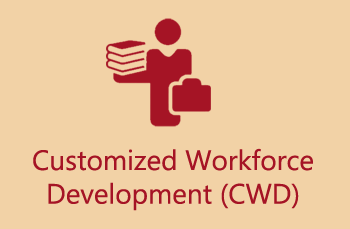
<style>
.page{position:relative;width:350px;height:229px;background:#f2d2a6}
.page>*{position:absolute;margin:0}
.t1{font:28px "Ebrima";color:#a51425}
</style>
<div class="page">
<p class="t1" style="left:33px;top:148px;width:280px;height:63px;text-align:center">Customized Workforce<br>Development (CWD)</p>
</div>
